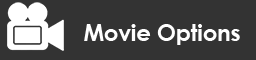
<style>
.page{position:relative;width:256px;height:60px;background:#333333}
.page>*{position:absolute;margin:0}
.t1{font:22.5px "CenturyGothic-Bold";color:#ffffff}
</style>
<div class="page">
<p class="t1" style="left:84px;top:24px;width:156px;height:21px">Movie Options</p>
</div>
